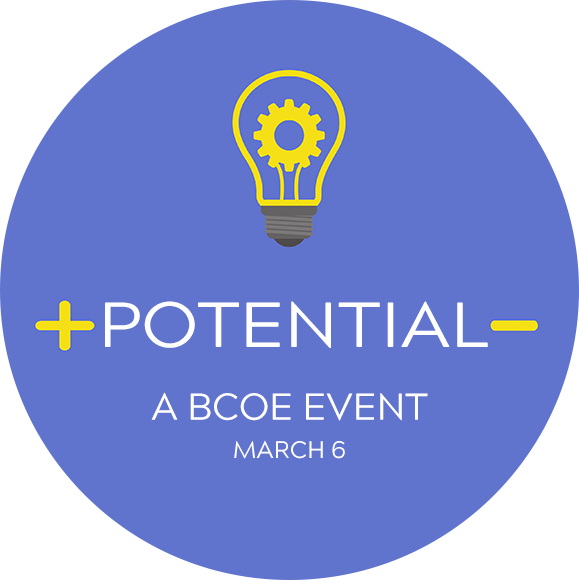
<style>
.page{position:relative;width:579px;height:580px;background:#6073cd}
.page>*{position:absolute;margin:0}
.t1{font:63.7px "AcherusGrotesque-Regular";color:#ffffff;scale:1.1 1}
.t2{font:37.3px "AcherusGrotesque-Regular";color:#ffffff}
.t3{font:24px "AcherusGrotesque-Regular";color:#ffffff}
</style>
<div class="page">
<p class="t1" style="left:105px;top:301px;width:383px;height:47px">POTENTIAL</p>
<p class="t2" style="left:151px;top:392px;width:277px;height:29px">A BCOE EVENT</p>
<p class="t3" style="left:234px;top:440px;width:111px;height:19px">MARCH 6</p>
</div>
